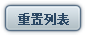
<style>
.page{position:relative;width:86px;height:36px}
.page>*{position:absolute;margin:0}
.t1{font:12px "SimSun";color:#2a4764;font-weight:bold}
</style>
<div class="page">
<p class="t1" style="left:18px;top:13px;width:51px;height:12px">重置列表</p>
</div>
